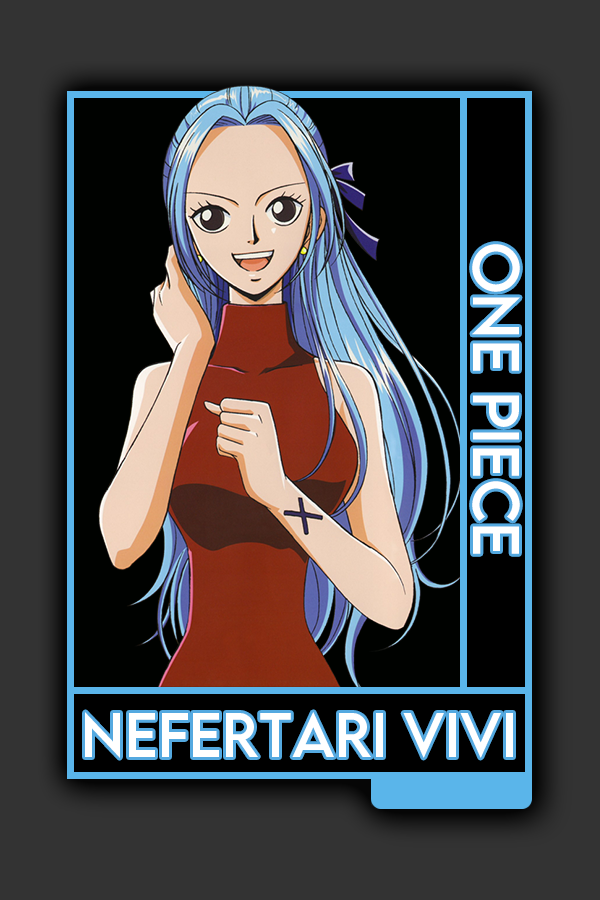
<style>
.page{position:relative;width:600px;height:900px;background:#333333}
.page>*{position:absolute;margin:0}
.t1{font:58.4px "LEMONMILK-Regular";color:#ffffff}
.t2{font:55.4px "LEMONMILK-Regular";color:#ffffff}
</style>
<div class="page">
<p class="t1" style="left:472px;top:244px;width:48px;height:310px;rotate:90deg">One Piece</p>
<p class="t2" style="left:85px;top:712px;width:428px;height:46px">Nefertari Vivi</p>
</div>
